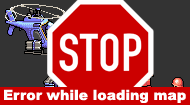
<style>
.page{position:relative;width:190px;height:105px;background:#333333}
.page>*{position:absolute;margin:0}
.t1{font:14px "Arial-Black";color:#ffffff}
</style>
<div class="page">
<p class="t1" style="left:4px;top:89px;width:182px;height:14px">Error while loading map</p>
</div>
